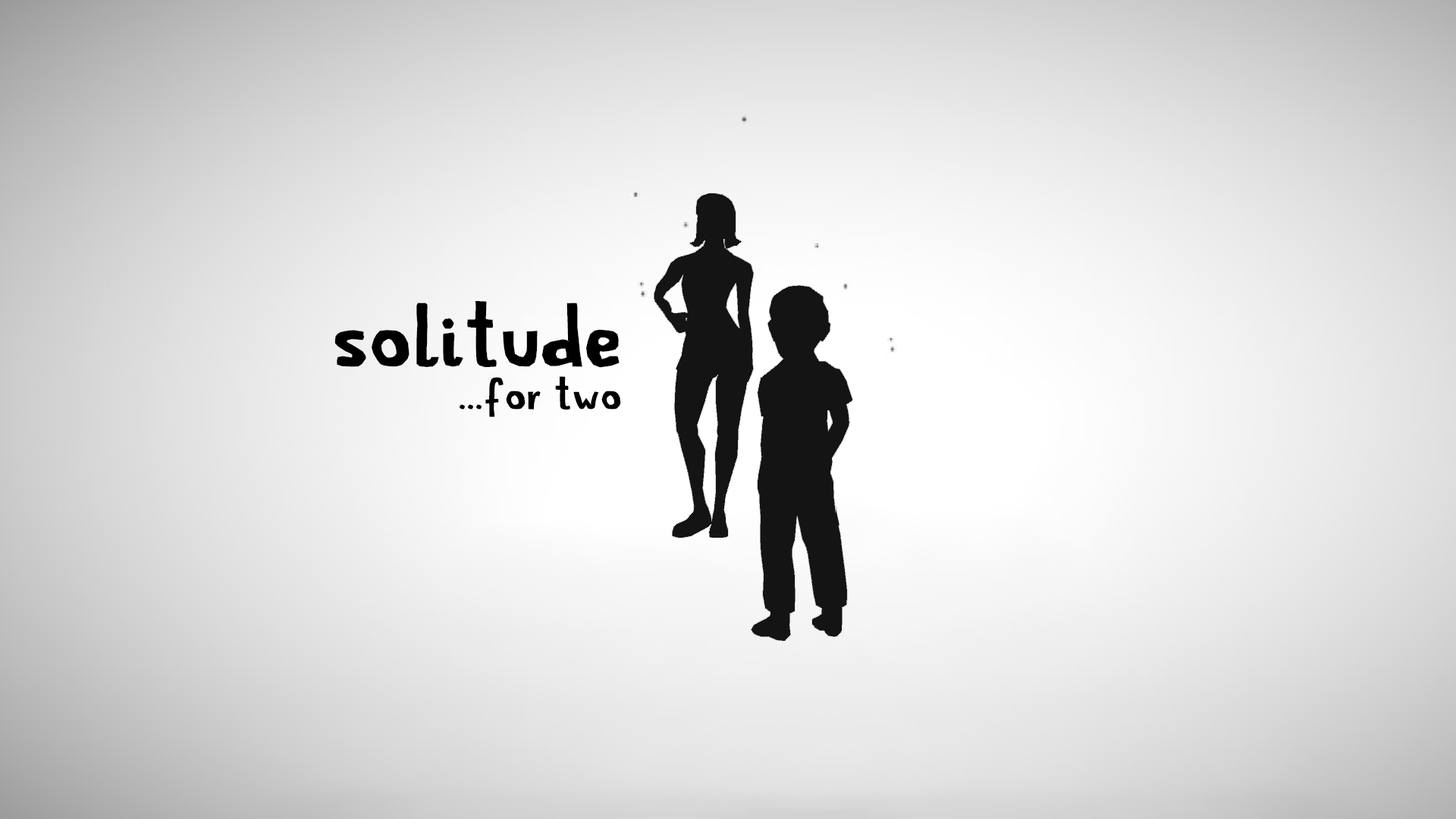
<style>
.page{position:relative;width:1456px;height:819px}
.page>*{position:absolute;margin:0}
.t1{font:72.8px "SimpleLife";letter-spacing:0.05em;color:#000000}
.t2{font:36.4px "SimpleLife";letter-spacing:0.05em;color:#000000}
</style>
<div class="page">
<p class="t1" style="left:334px;top:301px;width:286px;height:67px">solitude</p>
<p class="t2" style="left:459px;top:376px;width:162px;height:41px">...for two</p>
</div>
